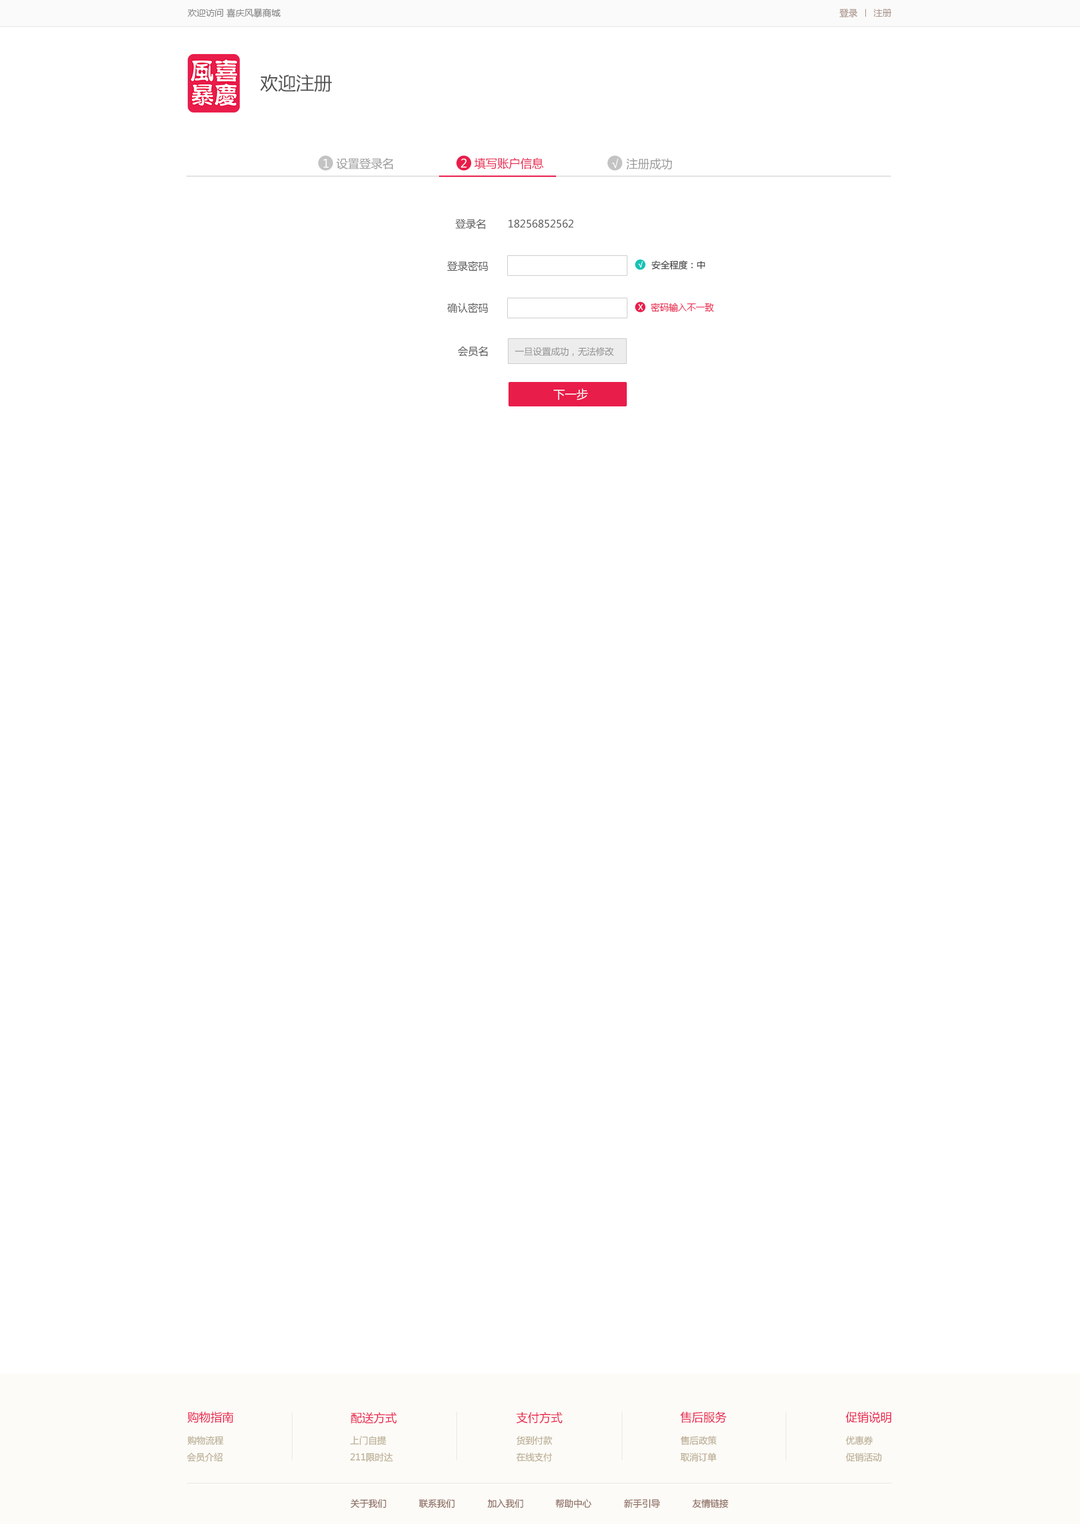
<style>
.page{position:relative;width:1080px;height:1524px;background:#ffffff}
.page>*{position:absolute;margin:0}
.t1{font:9px "MicrosoftYaHei";color:#848484}
.t2{font:9px "MicrosoftYaHei";color:#a99289}
.t3{font:18px "MicrosoftYaHei";color:#545454}
.t4{font:11.6px "MicrosoftYaHei";color:#999999}
.t5{font:11.6px "MicrosoftYaHei";color:#ffffff}
.t6{font:11.6px "MicrosoftYaHei";color:#e91d4a}
.t7{font:10.3px "MicrosoftYaHei";color:#545454}
.t8{font:7.7px "MicrosoftYaHei";color:#ffffff}
.t9{font:9px "MicrosoftYaHei";color:#3e3e3e}
.t10{font:9px "MicrosoftYaHei";color:#e91d4a}
.t11{font:9px "MicrosoftYaHei";color:#8b8b8b}
.t12{font:9px "MicrosoftYaHei";color:#baad93}
.t13{font:9px "MicrosoftYaHei";color:#8c6a5e}
</style>
<div class="page">
<p class="t1" style="left:188px;top:8px;width:93px;height:9px">欢迎访问 喜庆风暴商城</p>
<p class="t2" style="left:840px;top:8px;width:52px;height:9px">登录      注册</p>
<p class="t3" style="left:260px;top:74px;width:72px;height:18px">欢迎注册</p>
<p class="t4" style="left:323px;top:158px;width:70px;height:12px"><span class="t5">1  </span>设置登录名</p>
<p class="t6" style="left:461px;top:158px;width:83px;height:11px"><span class="t5">2  </span>填写账户信息</p>
<p class="t4" style="left:612px;top:158px;width:60px;height:12px"><span class="t5">√  </span>注册成功</p>
<p class="t7" style="left:455px;top:219px;width:118px;height:10px">登录名       18256852562</p>
<p class="t7" style="left:447px;top:261px;width:41px;height:10px">登录密码</p>
<p class="t8" style="left:638px;top:261px;width:5px;height:7px">√</p>
<p class="t9" style="left:651px;top:260px;width:54px;height:10px">安全程度：中</p>
<p class="t7" style="left:447px;top:303px;width:41px;height:10px">确认密码</p>
<p class="t8" style="left:638px;top:303px;width:5px;height:7px">X</p>
<p class="t10" style="left:651px;top:303px;width:63px;height:9px">密码输入不一致</p>
<p class="t7" style="left:458px;top:346px;width:30px;height:10px">会员名</p>
<p class="t11" style="left:515px;top:346px;width:99px;height:10px">一旦设置成功，无法修改</p>
<p class="t5" style="left:554px;top:388px;width:34px;height:12px">下一步</p>
<p class="t6" style="left:187px;top:1411px;width:46px;height:12px">购物指南</p>
<p class="t6" style="left:350px;top:1412px;width:47px;height:11px">配送方式</p>
<p class="t6" style="left:516px;top:1412px;width:46px;height:11px">支付方式</p>
<p class="t6" style="left:680px;top:1411px;width:46px;height:12px">售后服务</p>
<p class="t6" style="left:845px;top:1411px;width:47px;height:12px">促销说明</p>
<p class="t12" style="left:188px;top:1436px;width:36px;height:8px">购物流程</p>
<p class="t12" style="left:350px;top:1436px;width:36px;height:8px">上门自提</p>
<p class="t12" style="left:516px;top:1436px;width:36px;height:9px">货到付款</p>
<p class="t12" style="left:680px;top:1436px;width:37px;height:8px">售后政策</p>
<p class="t12" style="left:845px;top:1436px;width:28px;height:8px">优惠券</p>
<p class="t12" style="left:187px;top:1452px;width:35px;height:10px">会员介绍</p>
<p class="t12" style="left:350px;top:1452px;width:43px;height:10px">211限时达</p>
<p class="t12" style="left:516px;top:1452px;width:36px;height:9px">在线支付</p>
<p class="t12" style="left:680px;top:1452px;width:37px;height:10px">取消订单</p>
<p class="t12" style="left:845px;top:1452px;width:37px;height:9px">促销活动</p>
<p class="t13" style="left:350px;top:1498px;width:36px;height:10px">关于我们</p>
<p class="t13" style="left:419px;top:1498px;width:36px;height:10px">联系我们</p>
<p class="t13" style="left:487px;top:1498px;width:36px;height:10px">加入我们</p>
<p class="t13" style="left:555px;top:1498px;width:36px;height:10px">帮助中心</p>
<p class="t13" style="left:624px;top:1498px;width:36px;height:10px">新手引导</p>
<p class="t13" style="left:692px;top:1498px;width:36px;height:10px">友情链接</p>
</div>
